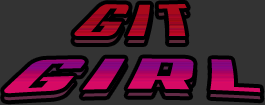
<style>
.page{position:relative;width:265px;height:105px;background:#333333}
.page>*{position:absolute;margin:0}
.t1{font:48px "Aero";letter-spacing:0.125em;scale:1.5 1}
</style>
<div class="page">
<p class="t1" style="left:4px;top:4px;width:257px;height:90px;text-align:center">GIT<br>GIRL</p>
<p class="t1" style="left:4px;top:11px;width:257px;height:90px;text-align:center">GIT<br>GIRL</p>
</div>
